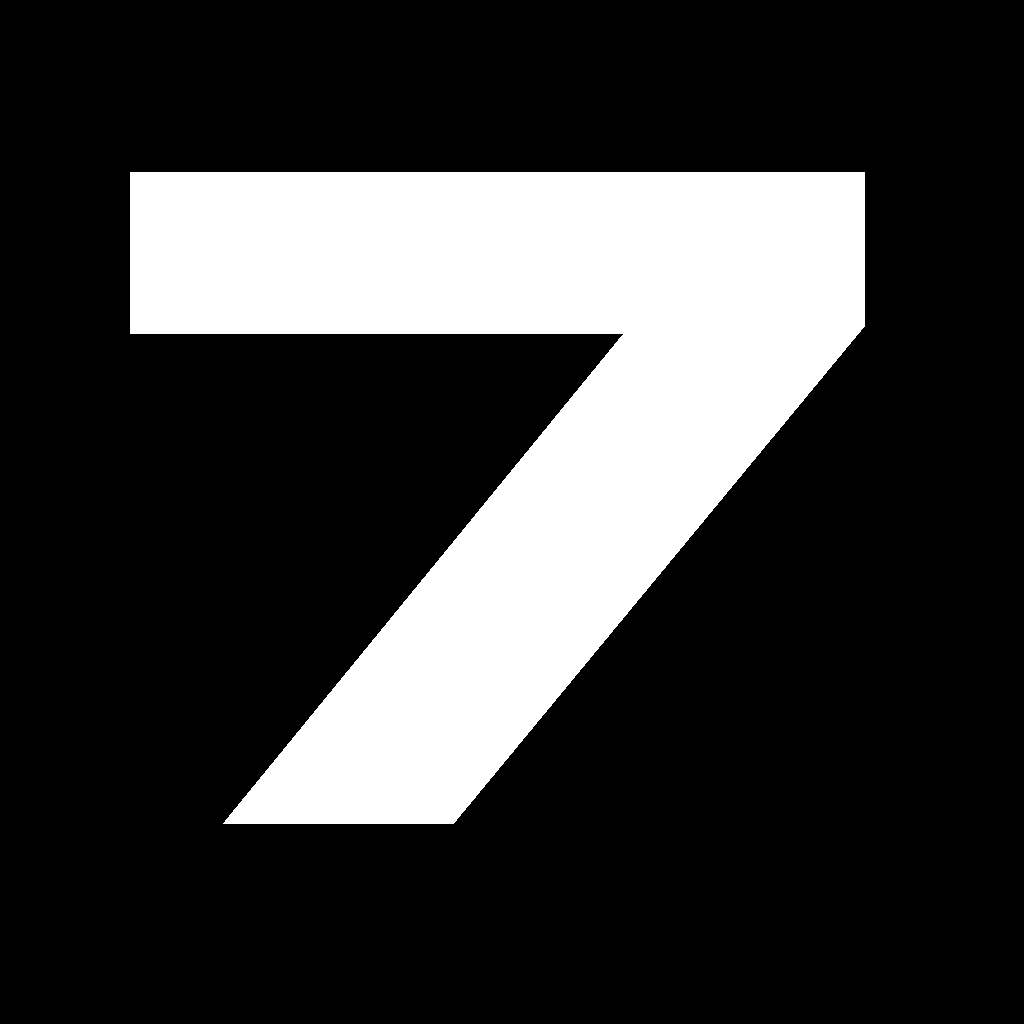
<style>
.page{position:relative;width:1024px;height:1024px;background:#000000}
.page>*{position:absolute;margin:0}
.t1{font:895.8px "Square721BT-BoldExtended";color:#ffffff}
</style>
<div class="page">
<p class="t1" style="left:130px;top:172px;width:735px;height:652px">7</p>
</div>
